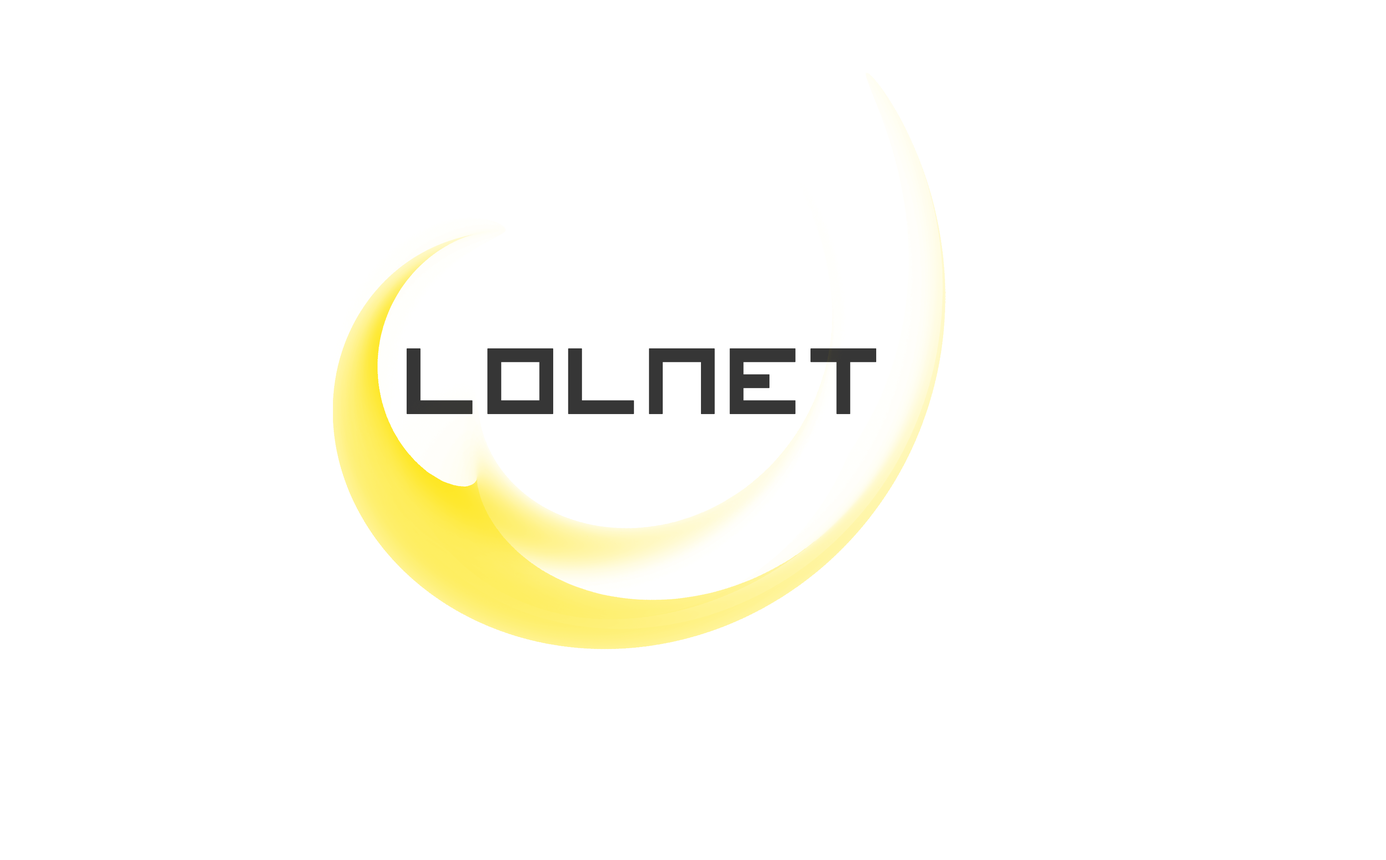
<style>
.page{position:relative;width:1386px;height:860px;background:#ffffff}
.page>*{position:absolute;margin:0}
.t1{font:104px "imagine-font";color:#363635;font-weight:bold}
</style>
<div class="page">
<p class="t1" style="left:407px;top:349px;width:469px;height:65px">lolnet</p>
</div>
